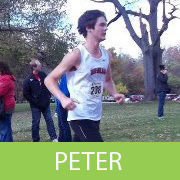
<style>
.page{position:relative;width:180px;height:180px;background:#97cc53}
.page>*{position:absolute;margin:0}
.t1{font:26.7px "MyriadPro-Regular";color:#faf7f7}
</style>
<div class="page">
<p class="t1" style="left:56px;top:152px;width:66px;height:18px">PETER</p>
</div>
